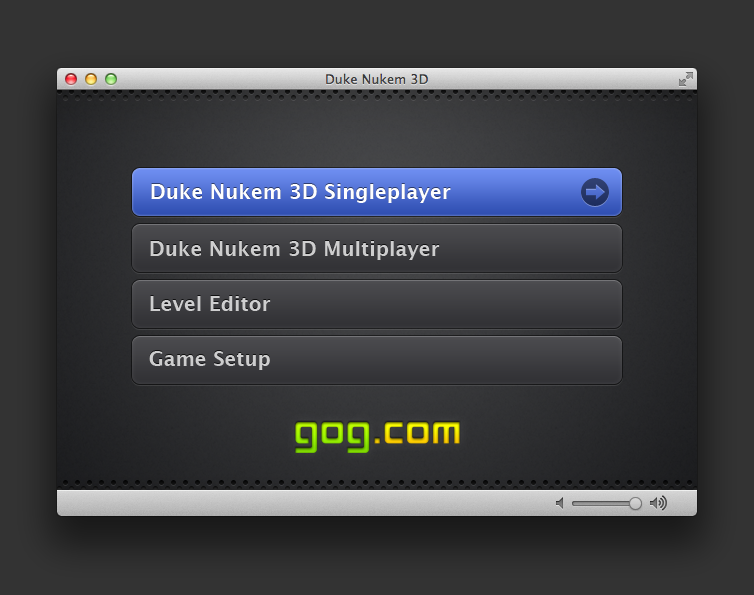
<style>
.page{position:relative;width:754px;height:595px}
.page>*{position:absolute;margin:0}
.t1{font:20px "LucidaGrande-Bold";color:#fefefe}
.t2{font:20px "LucidaGrande-Bold";color:#cecece}
.t3{font:20px "LucidaGrande-Bold";color:#cececf}
</style>
<div class="page">
<p class="t1" style="left:151px;top:184px;width:300px;height:19px">Duke Nukem 3D Singleplayer</p>
<p class="t2" style="left:150px;top:241px;width:290px;height:19px">Duke Nukem 3D Multiplayer</p>
<p class="t3" style="left:150px;top:296px;width:121px;height:15px">Level Editor</p>
<p class="t3" style="left:149px;top:351px;width:121px;height:19px">Game Setup</p>
</div>
